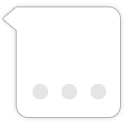
<style>
.page{position:relative;width:128px;height:128px;background:#ffffff}
.page>*{position:absolute;margin:0}
.t1{font:130px "GillSans";letter-spacing:0.005em;color:#e5e5e5}
</style>
<div class="page">
<p class="t1" style="left:32px;top:84px;width:74px;height:16px">...</p>
</div>
